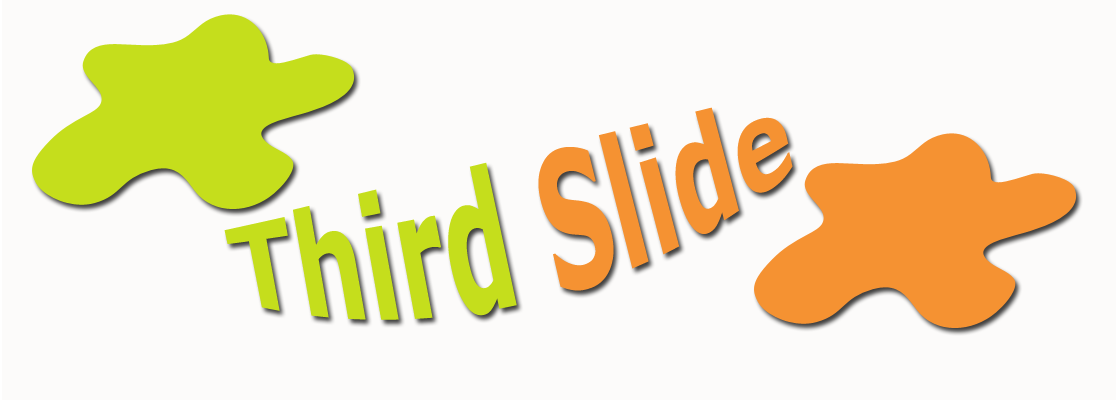
<style>
.page{position:relative;width:1116px;height:400px;background:#fcfbfa}
.page>*{position:absolute;margin:0}
.t1{font:100px "Verdana-Bold";color:#c5de1c;scale:0.95 1}
.t2{font:100px "Verdana-Bold";color:#f59232;scale:0.95 1}
</style>
<div class="page">
<p class="t1" style="left:224px;top:107px;width:569px;height:213px;rotate:-14deg">Third <span class="t2">Slide</span></p>
</div>
